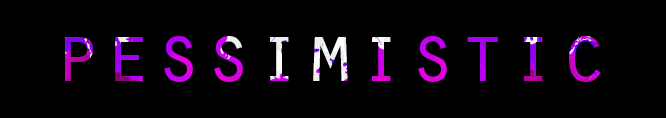
<style>
.page{position:relative;width:666px;height:118px;background:#000000}
.page>*{position:absolute;margin:0}
.t1{font:84.7px "OratorStd"}
</style>
<div class="page">
<p class="t1" style="left:65px;top:36px;width:536px;height:46px">pessimistic</p>
</div>
